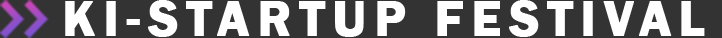
<style>
.page{position:relative;width:722px;height:38px;background:#333333}
.page>*{position:absolute;margin:0}
.t1{font:51px "FranklinGothic-Demi";letter-spacing:0.14em;color:#ffffff;font-weight:bold}
</style>
<div class="page">
<p class="t1" style="left:65px;top:0px;width:640px;height:37px">KI-STARTUP FESTIVAL</p>
</div>
